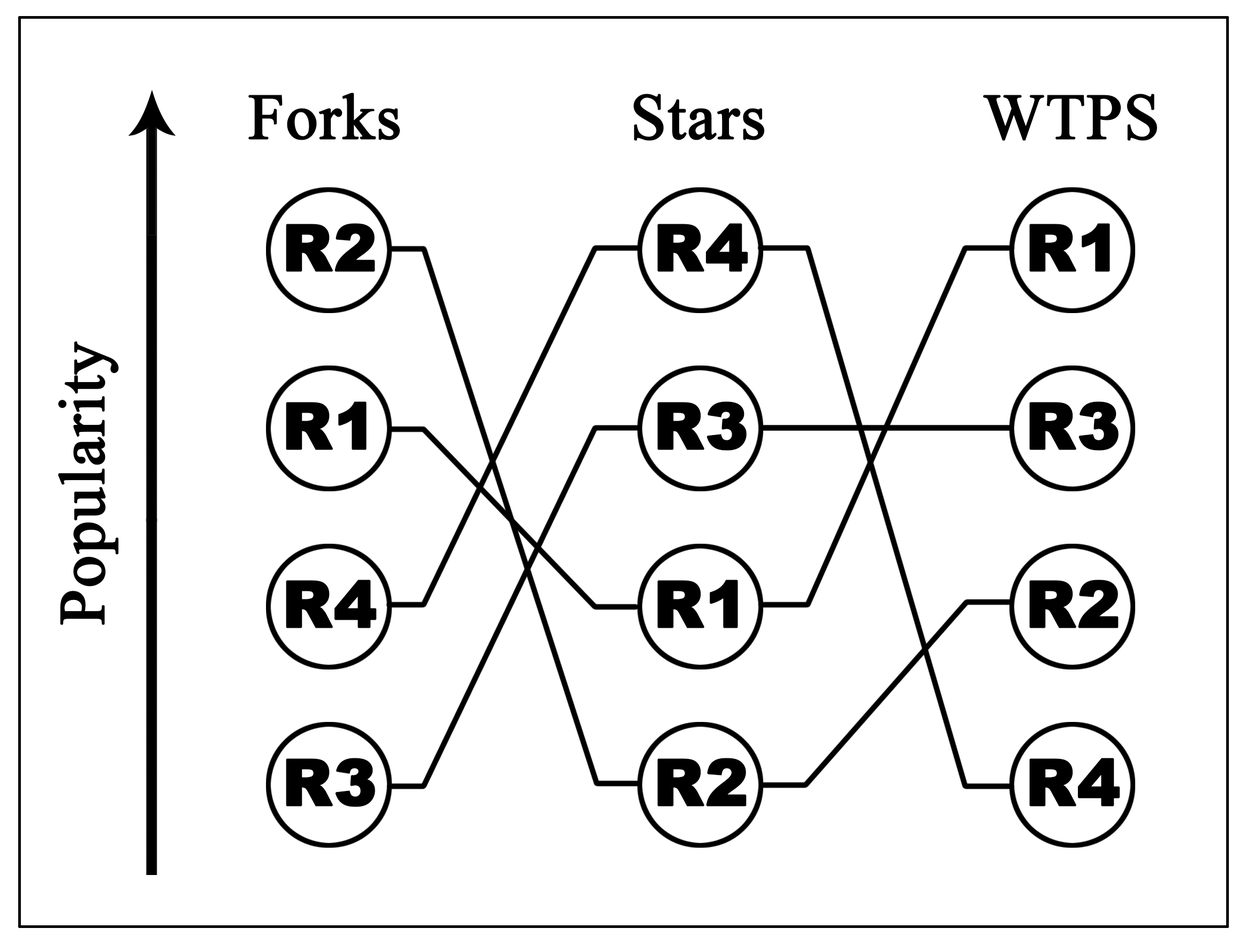
<style>
.page{position:relative;width:1254px;height:951px;background:#ffffff}
.page>*{position:absolute;margin:0}
.t1{font:64.2px "TimesNewRomanPSMT";color:#000000;font-weight:bold}
.t2{font:64.2px "Arial-Black";color:#000000;font-weight:bold}
</style>
<div class="page">
<p class="t1" style="left:248px;top:93px;width:152px;height:47px">Forks</p>
<p class="t1" style="left:633px;top:94px;width:132px;height:47px">Stars</p>
<p class="t1" style="left:983px;top:94px;width:174px;height:47px">WTPS</p>
<p class="t2" style="left:286px;top:223px;width:89px;height:49px">R2</p>
<p class="t2" style="left:657px;top:223px;width:91px;height:49px">R4</p>
<p class="t2" style="left:1029px;top:223px;width:81px;height:49px">R1</p>
<p class="t1" style="left:58px;top:341px;width:61px;height:284px;rotate:-90deg">Popularity</p>
<p class="t2" style="left:286px;top:401px;width:81px;height:49px">R1</p>
<p class="t2" style="left:657px;top:401px;width:90px;height:50px">R3</p>
<p class="t2" style="left:1029px;top:401px;width:89px;height:50px">R3</p>
<p class="t2" style="left:286px;top:580px;width:91px;height:48px">R4</p>
<p class="t2" style="left:657px;top:580px;width:81px;height:48px">R1</p>
<p class="t2" style="left:1029px;top:580px;width:89px;height:48px">R2</p>
<p class="t2" style="left:286px;top:758px;width:89px;height:49px">R3</p>
<p class="t2" style="left:657px;top:758px;width:90px;height:48px">R2</p>
<p class="t2" style="left:1029px;top:758px;width:91px;height:48px">R4</p>
</div>
